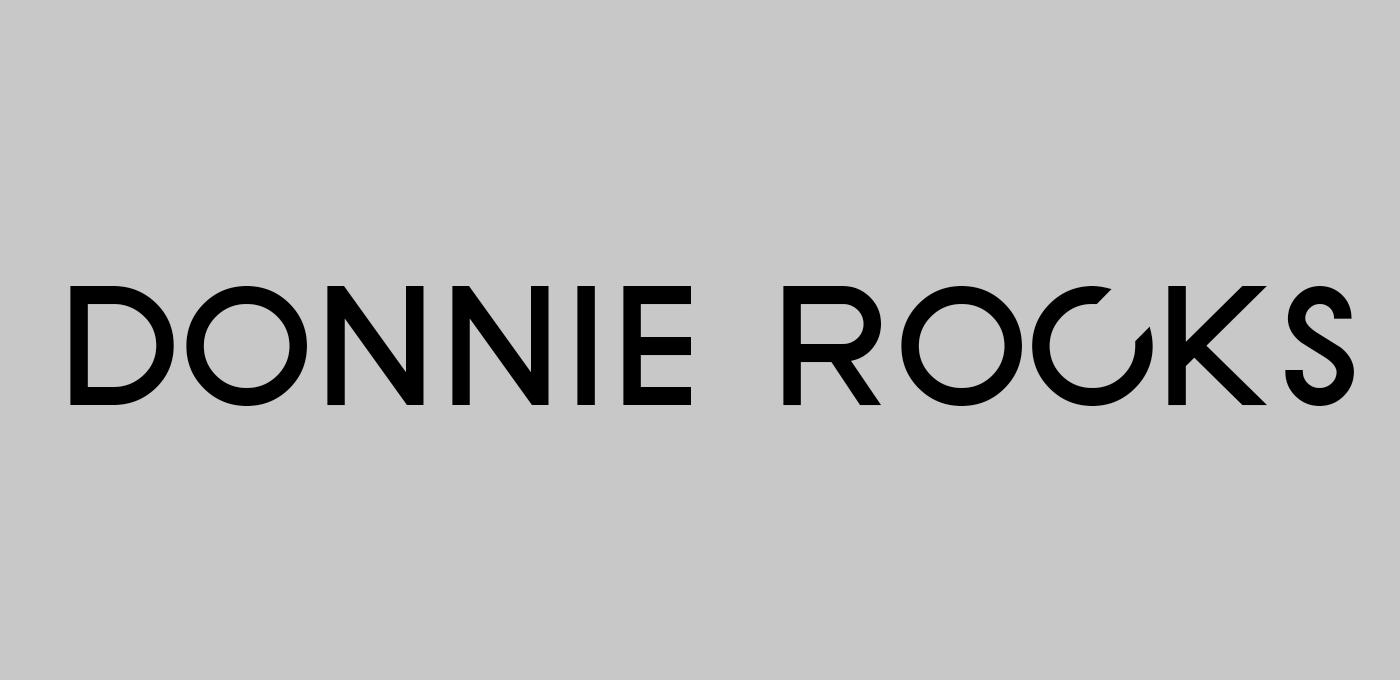
<style>
.page{position:relative;width:1400px;height:680px;background:#c9c8c8}
.page>*{position:absolute;margin:0}
.t1{font:175px "SFNewRepublicSCBold";color:#000000}
</style>
<div class="page">
<p class="t1" style="left:70px;top:286px;width:1284px;height:120px">donnie rocks</p>
</div>
